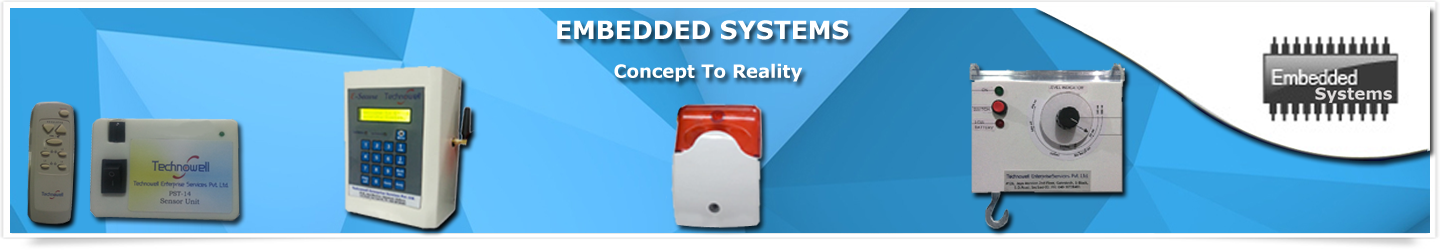
<style>
.page{position:relative;width:1440px;height:250px}
.page>*{position:absolute;margin:0}
.t1{font:25px "Verdana-Bold";color:#ffffff}
.t2{font:18px "Verdana-Bold";color:#ffffff}
</style>
<div class="page">
<p class="t1" style="left:557px;top:20px;width:292px;height:20px">EMBEDDED SYSTEMS</p>
<p class="t2" style="left:614px;top:63px;width:189px;height:19px">Concept To Reality</p>
</div>
